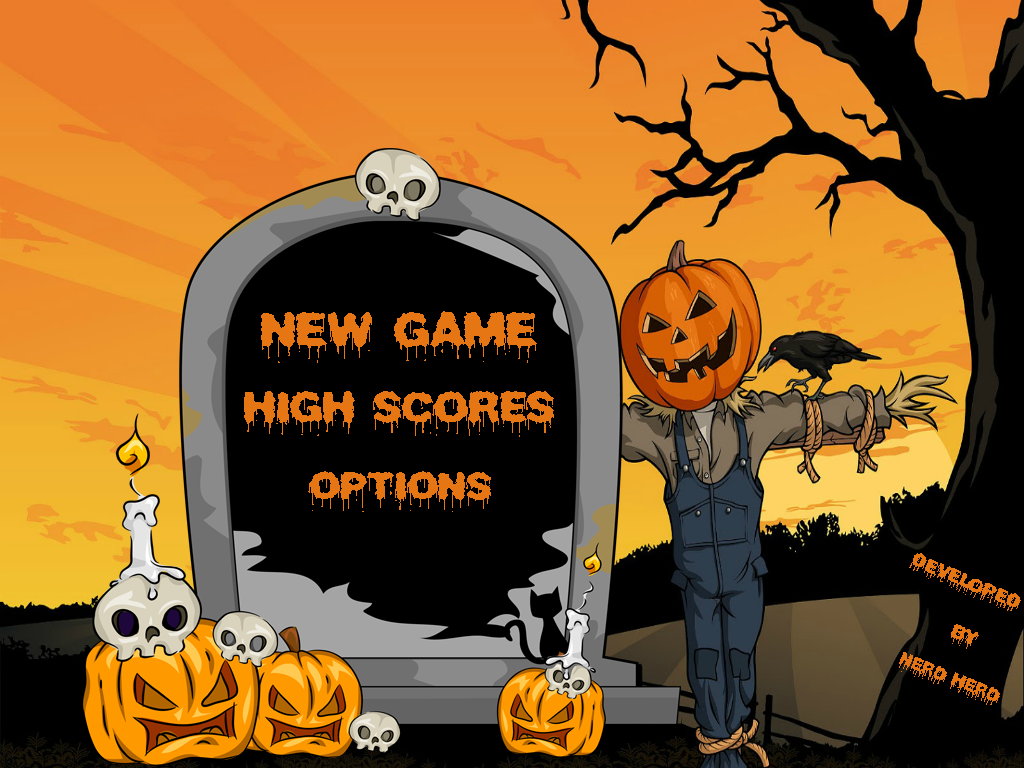
<style>
.page{position:relative;width:1024px;height:768px;background:#000000}
.page>*{position:absolute;margin:0}
.t1{font:50px "PlasmaDrip(BRK)";color:#e67514}
.t2{font:45px "PlasmaDrip(BRK)";color:#e67514}
.t3{font:40px "PlasmaDrip(BRK)";color:#e67514}
.t4{font:20px "PlasmaDrip(BRK)";color:#e67514}
.t5{font:18px "PlasmaDrip(BRK)";color:#e67514}
</style>
<div class="page">
<p class="t1" style="left:261px;top:311px;width:276px;height:52px">NEW GAME</p>
<p class="t2" style="left:244px;top:391px;width:310px;height:46px">HIGH SCORES</p>
<p class="t3" style="left:308px;top:471px;width:183px;height:41px">OPTIONS</p>
<p class="t4" style="left:909px;top:553px;width:112px;height:58px;rotate:23deg">DEVELOPED</p>
<p class="t4" style="left:951px;top:624px;width:28px;height:25px;rotate:22deg">BY</p>
<p class="t5" style="left:899px;top:652px;width:101px;height:53px;rotate:22deg">NERD HERD</p>
</div>
